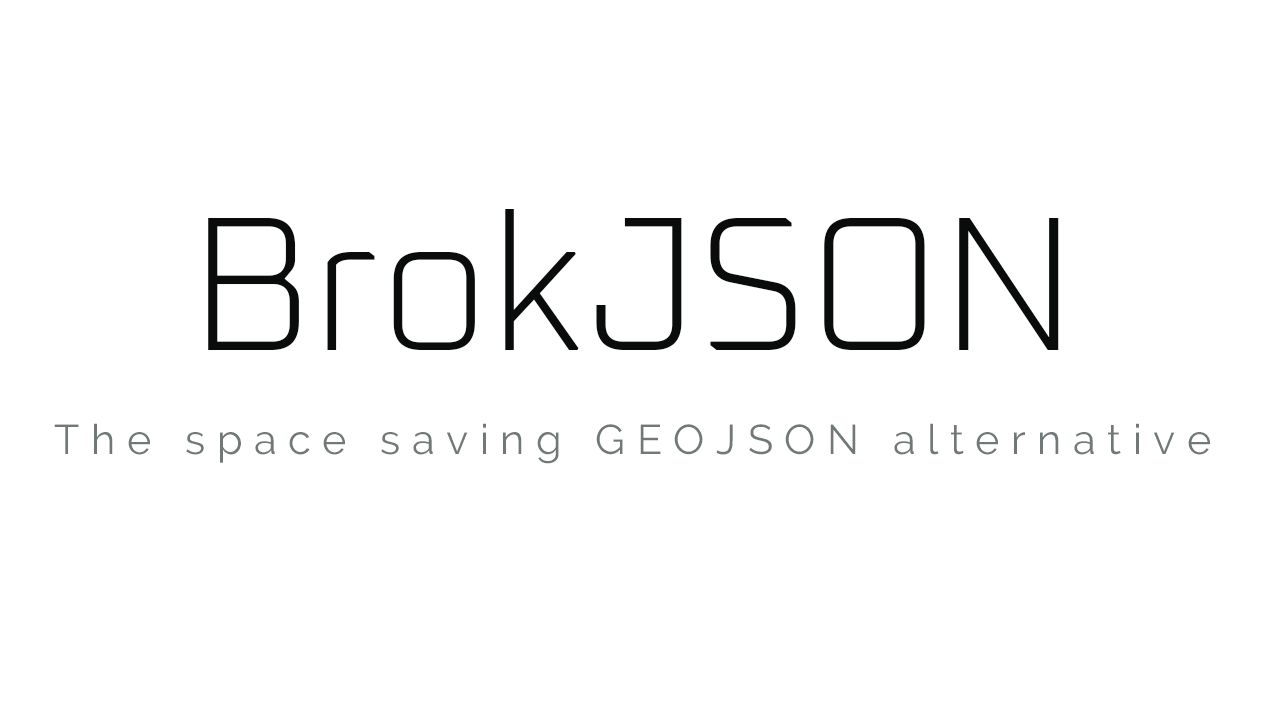
<style>
.page{position:relative;width:1265px;height:712px;background:#ffffff}
.page>*{position:absolute;margin:0}
.t1{font:190.7px "Oxanium-ExtraLight";color:#0a0c0c}
.t2{font:41.4px "Raleway-Regular";letter-spacing:0.28em;color:#707878}
</style>
<div class="page">
<p class="t1" style="left:208px;top:209px;width:851px;height:141px">BrokJSON</p>
<p class="t2" style="left:54px;top:423px;width:1156px;height:41px">The space saving GEOJSON alternative</p>
</div>
